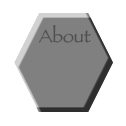
<style>
.page{position:relative;width:126px;height:126px;background:#ffffff}
.page>*{position:absolute;margin:0}
.t1{font:18px "Papyrus";color:#4f4f4f}
</style>
<div class="page">
<p class="t1" style="left:39px;top:25px;width:52px;height:18px">About</p>
</div>
